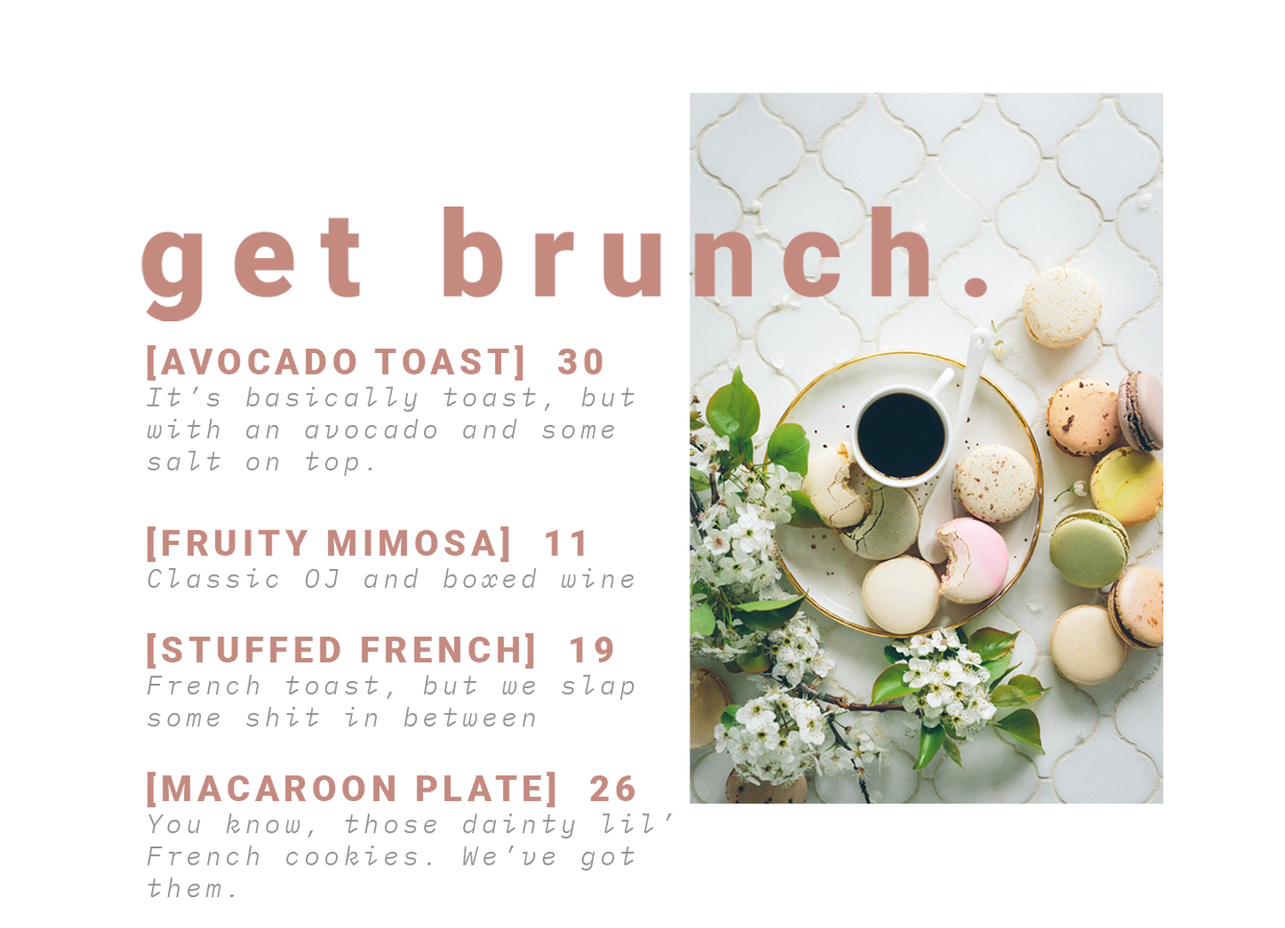
<style>
.page{position:relative;width:1285px;height:928px;background:#ffffff}
.page>*{position:absolute;margin:0}
.t1{font:119.3px "Roboto-Black";letter-spacing:0.2em;color:#c48a80}
.t2{font:26.7px "IBMPlexMono-LightItalic";letter-spacing:0.14em;color:#8e8e8e}
.t3{font:35.6px "Roboto-Black";letter-spacing:0.14em;color:#c48a80}
</style>
<div class="page">
<p class="t1" style="left:141px;top:206px;width:846px;height:115px">get brunch.</p>
<p class="t2" style="left:147px;top:345px;width:526px;height:552px"><span class="t3">[AVOCADO TOAST]  30<br></span>It’s basically toast, but<br>with an avocado and some <br>salt on top.<br><span class="t3"><br>[FRUITY MIMOSA]  11<br></span>Classic OJ and boxed wine<br><br><span class="t3">[STUFFED FRENCH]  19<br></span>French toast, but we slap<br>some shit in between<br><br><span class="t3">[MACAROON PLATE]  26<br></span>You know, those dainty lil’<br>French cookies. We’ve got<br>them.</p>
</div>
